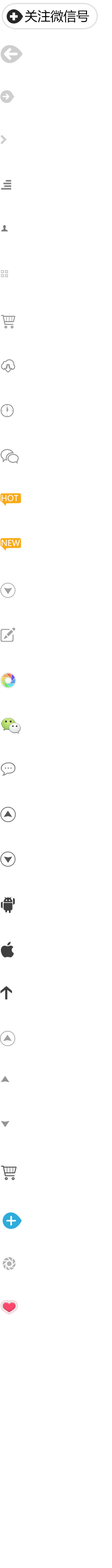
<style>
.page{position:relative;width:112px;height:1568px;background:#ffffff}
.page>*{position:absolute;margin:0}
.t1{font:13px "MicrosoftYaHei";color:#000000}
</style>
<div class="page">
<p class="t1" style="left:25px;top:10px;width:64px;height:13px">关注微信号</p>
</div>
